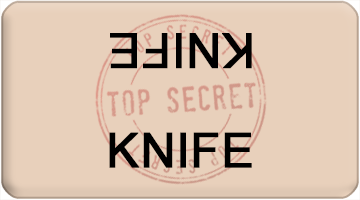
<style>
.page{position:relative;width:360px;height:200px;background:#e8d0bb}
.page>*{position:absolute;margin:0}
.t1{font:48px "ArialMT";color:#000000;font-weight:bold}
</style>
<div class="page">
<p class="t1" style="left:110px;top:33px;width:142px;height:36px;rotate:180deg">KNIFE</p>
<p class="t1" style="left:109px;top:132px;width:143px;height:36px">KNIFE</p>
</div>
